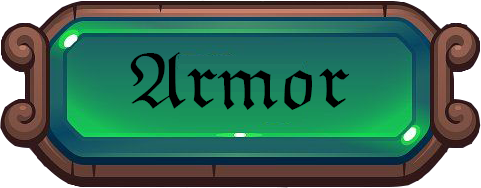
<style>
.page{position:relative;width:481px;height:188px}
.page>*{position:absolute;margin:0}
.t1{font:80px "EuclidFraktur";color:#000000}
</style>
<div class="page">
<p class="t1" style="left:130px;top:52px;width:219px;height:58px">Armor</p>
</div>
